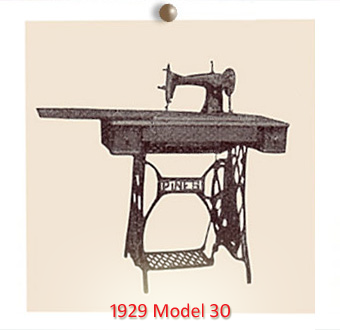
<style>
.page{position:relative;width:340px;height:330px;background:#f2e5d5}
.page>*{position:absolute;margin:0}
.t1{font:20px "Calibri";color:#ef171e}
</style>
<div class="page">
<p class="t1" style="left:110px;top:303px;width:120px;height:15px">1929 Model 30</p>
</div>
